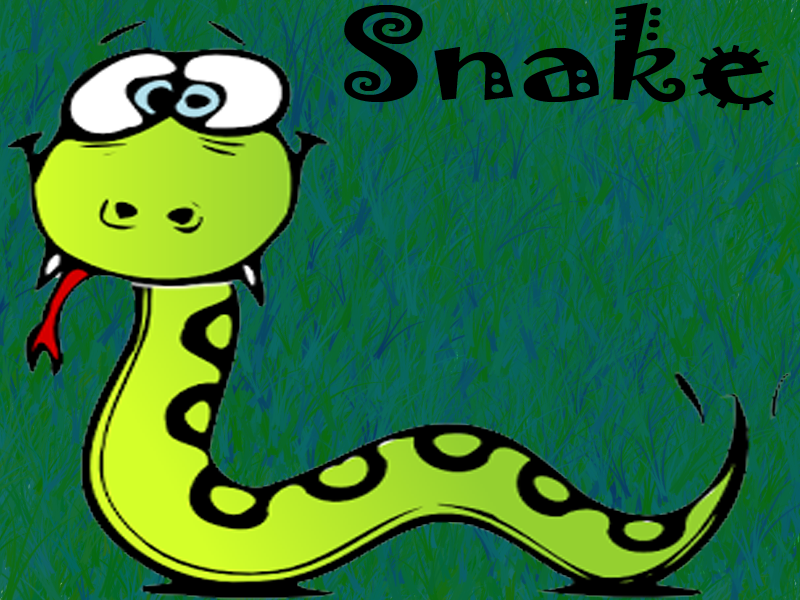
<style>
.page{position:relative;width:800px;height:600px}
.page>*{position:absolute;margin:0}
.t1{font:108.5px "Jokerman-Regular";color:#000000;scale:1.4 1}
</style>
<div class="page">
<p class="t1" style="left:344px;top:3px;width:431px;height:108px">Snake</p>
</div>
